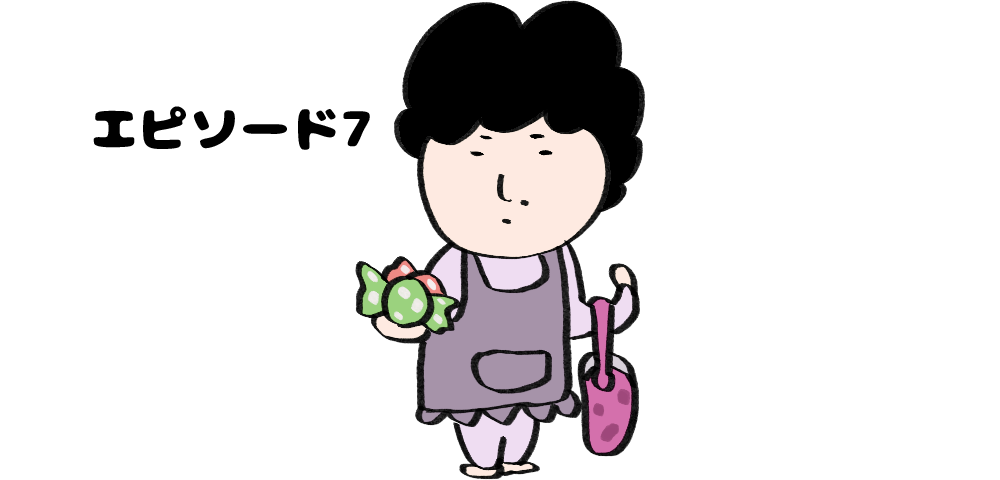
<style>
.page{position:relative;width:1000px;height:480px;background:#ffffff}
.page>*{position:absolute;margin:0}
.t1{font:50px "07NikumaruFont";letter-spacing:0.08em;color:#000000}
</style>
<div class="page">
<p class="t1" style="left:93px;top:106px;width:277px;height:44px">エピソード7</p>
</div>
